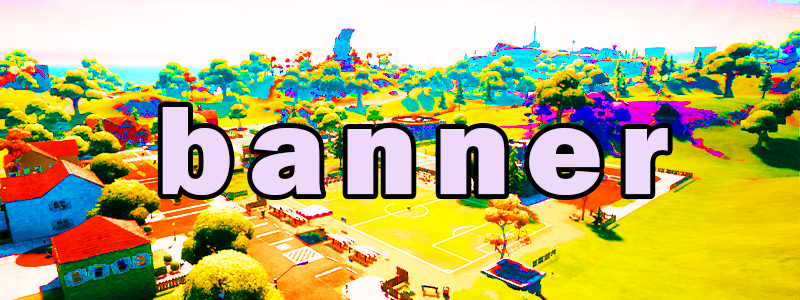
<style>
.page{position:relative;width:800px;height:300px}
.page>*{position:absolute;margin:0}
.t1{font:131px "FranklinGothic-Heavy";letter-spacing:0.12em;color:#eed9fb}
</style>
<div class="page">
<p class="t1" style="left:162px;top:107px;width:506px;height:88px">banner</p>
</div>
